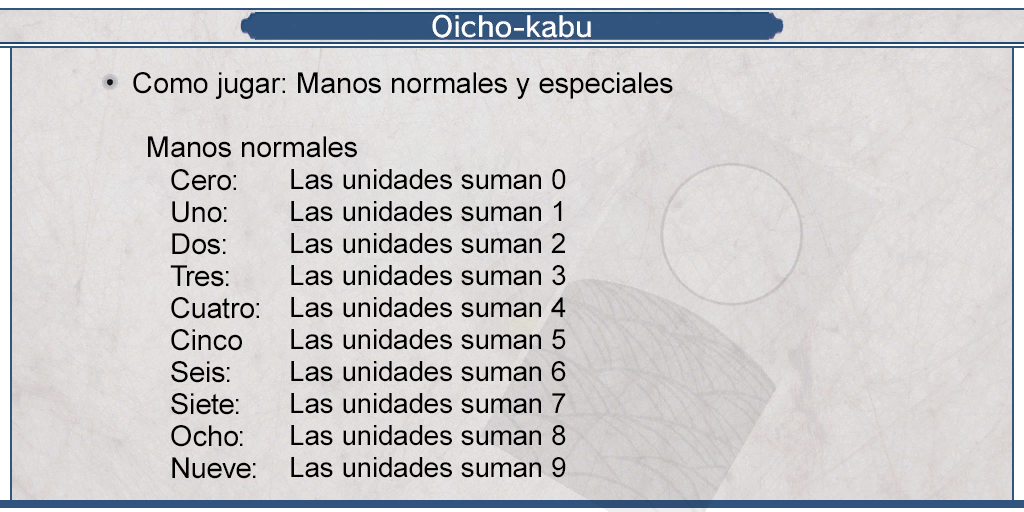
<style>
.page{position:relative;width:1024px;height:512px}
.page>*{position:absolute;margin:0}
.t1{font:29px "ArialMT";color:#000000}
.t2{font:29px/32px "ArialMT";color:#000000}
.t3{font:28px/32px "ArialMT";color:#000000}
</style>
<div class="page">
<p class="t1" style="left:133px;top:72px;width:540px;height:27px">Como jugar: Manos normales y especiales</p>
<p class="t1" style="left:148px;top:136px;width:209px;height:22px">Manos normales</p>
<p class="t2" style="left:170px;top:169px;width:89px;height:310px">Cero:<br>Uno:<br>Dos:<br>Tres:<br>Cuatro:<br>Cinco<br>Seis:<br>Siete:<br>Ocho:<br>Nueve:</p>
<p class="t3" style="left:291px;top:169px;width:275px;height:309px">Las unidades suman 0<br>Las unidades suman 1<br>Las unidades suman 2<br>Las unidades suman 3<br>Las unidades suman 4<br>Las unidades suman 5<br>Las unidades suman 6<br>Las unidades suman 7<br>Las unidades suman 8<br>Las unidades suman 9</p>
</div>
